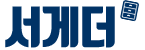
<style>
.page{position:relative;width:145px;height:50px;background:#ffffff}
.page>*{position:absolute;margin:0}
.t1{font:44.6px "TmonMonsoriBlack";letter-spacing:-0.04em;color:#003366;scale:0.97 1}
</style>
<div class="page">
<p class="t1" style="left:5px;top:6px;width:110px;height:42px">서게더</p>
</div>
